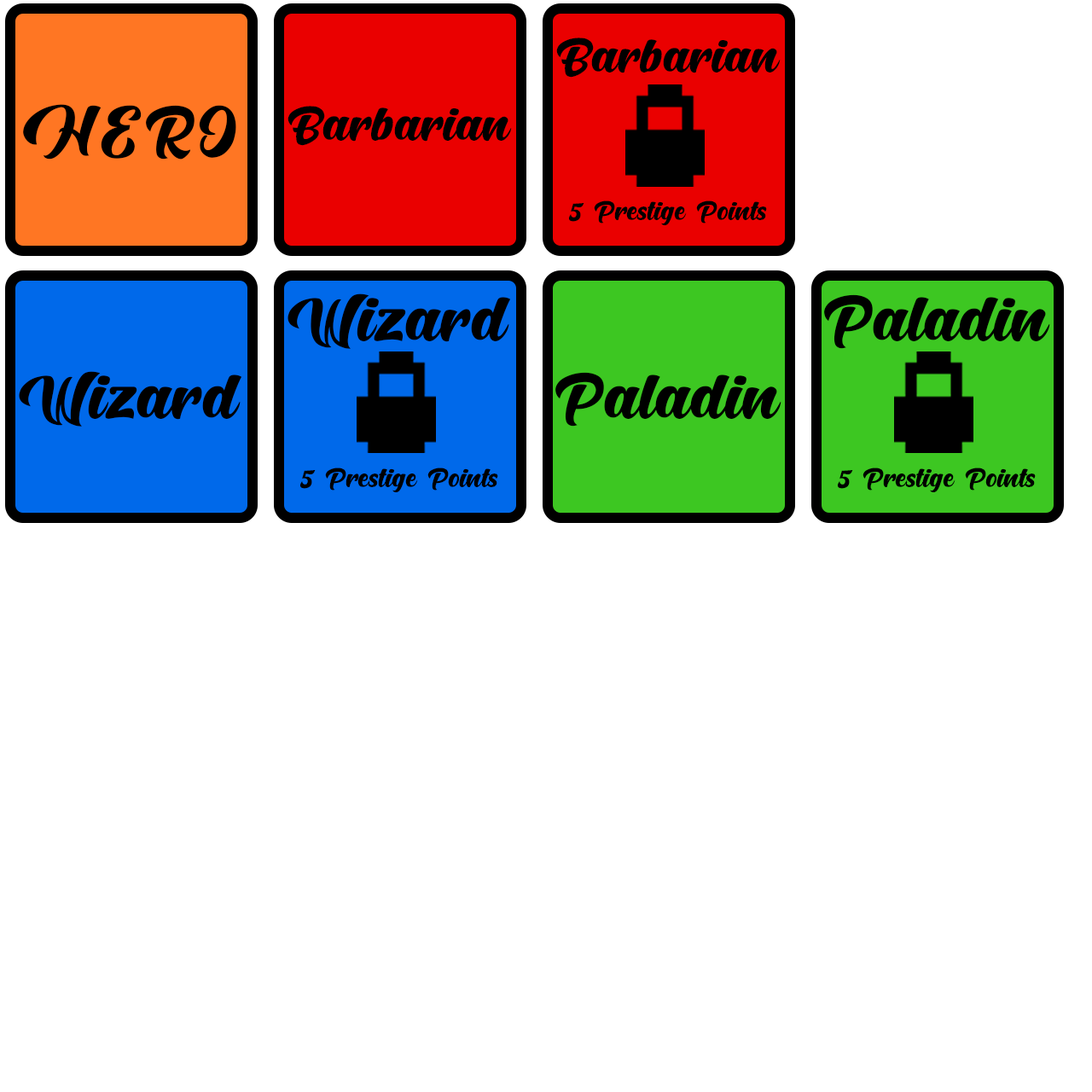
<style>
.page{position:relative;width:1092px;height:1092px;background:#ffffff}
.page>*{position:absolute;margin:0}
.t1{font:71px "Hunters";color:#000000}
.t2{font:94.6px "Hunters";color:#000000}
.t3{font:39.4px "Hunters";color:#000000}
</style>
<div class="page">
<p class="t1" style="left:556px;top:38px;width:225px;height:40px">Barbarian</p>
<p class="t2" style="left:23px;top:104px;width:213px;height:56px">HERO</p>
<p class="t1" style="left:287px;top:106px;width:225px;height:40px">Barbarian</p>
<p class="t3" style="left:568px;top:200px;width:199px;height:25px">5 Prestige Points</p>
<p class="t2" style="left:287px;top:293px;width:224px;height:56px">Wizard</p>
<p class="t2" style="left:824px;top:294px;width:226px;height:55px">Paladin</p>
<p class="t2" style="left:19px;top:371px;width:223px;height:56px">Wizard</p>
<p class="t2" style="left:555px;top:372px;width:226px;height:55px">Paladin</p>
<p class="t3" style="left:299px;top:468px;width:199px;height:24px">5 Prestige Points</p>
<p class="t3" style="left:837px;top:468px;width:199px;height:24px">5 Prestige Points</p>
</div>
